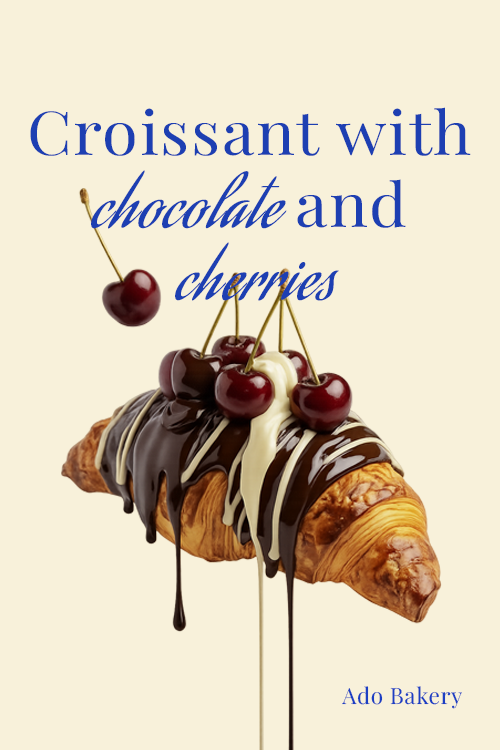
<style>
.page{position:relative;width:500px;height:750px;background:#f8f1da}
.page>*{position:absolute;margin:0}
.t1{font:60.6px/72px "PlayfairDisplay-Regular";letter-spacing:0.025em;color:#1d3fb2;scale:1.07 1}
.t2{font:60.6px/72px "AguafinaScript-Regular";letter-spacing:0.025em;color:#1d3fb2;scale:1.07 1}
.t3{font:22.5px "PlayfairDisplay-Regular";letter-spacing:0.025em;color:#1c3fc3}
</style>
<div class="page">
<p class="t1" style="left:30px;top:107px;width:441px;height:194px;text-align:center">Croissant with<span class="t2"> <br>chocolate </span>and<span class="t2"> <br>cherries</span></p>
<p class="t3" style="left:342px;top:686px;width:120px;height:23px">Ado Bakery</p>
</div>
